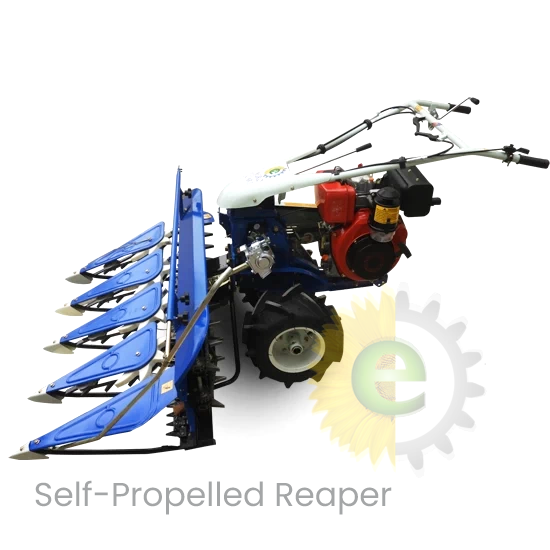
<style>
.page{position:relative;width:550px;height:550px;background:#ffffff}
.page>*{position:absolute;margin:0}
.t1{font:33.1px "Poppins-Regular";color:#a4a6a7}
</style>
<div class="page">
<p class="t1" style="left:35px;top:480px;width:357px;height:35px">Self-Propelled Reaper</p>
</div>
